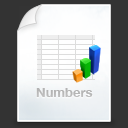
<style>
.page{position:relative;width:128px;height:128px;background:#333333}
.page>*{position:absolute;margin:0}
.t1{font:13px "HelveticaNeue-Bold";color:#cccccc}
</style>
<div class="page">
<p class="t1" style="left:36px;top:88px;width:57px;height:9px">Numbers</p>
</div>
